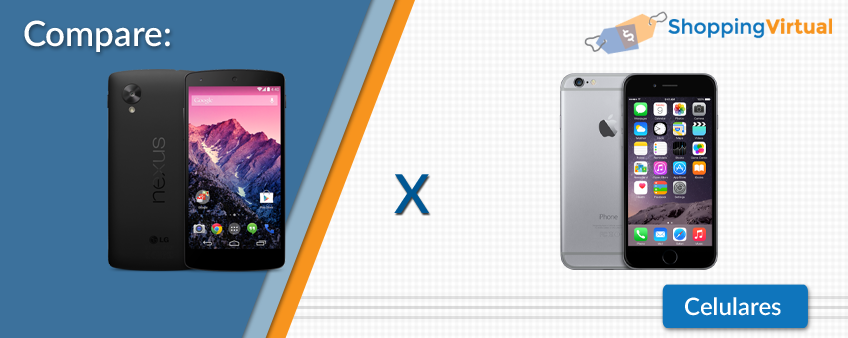
<style>
.page{position:relative;width:848px;height:338px;background:#3c719c}
.page>*{position:absolute;margin:0}
.t1{font:35px "Lato-Semibold";color:#ffffff}
.t2{font:53.6px "Lato-Semibold";color:#005794}
.t3{font:24.1px "Lato-Semibold";color:#ffffff}
</style>
<div class="page">
<p class="t1" style="left:24px;top:20px;width:146px;height:32px">Compare:</p>
<p class="t2" style="left:394px;top:174px;width:35px;height:39px">X</p>
<p class="t3" style="left:685px;top:297px;width:96px;height:19px">Celulares</p>
</div>
